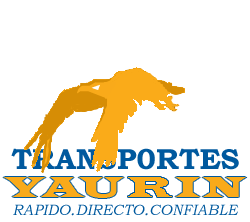
<style>
.page{position:relative;width:250px;height:222px;background:#ffffff}
.page>*{position:absolute;margin:0}
.t1{font:29px "BookmanOldStyle-Bold";letter-spacing:0.01em;color:#00599e}
.t2{font:30px "LatinWide";letter-spacing:0.025em;color:#f9aa1a}
.t3{font:15px "BookmanOldStyle-Italic";letter-spacing:0.005em;color:#00599e}
.t4{font:18px "BookmanOldStyle-Italic";letter-spacing:0.005em;color:#00599e}
</style>
<div class="page">
<p class="t1" style="left:11px;top:148px;width:228px;height:22px">TRANSP0RTES</p>
<p class="t2" style="left:3px;top:177px;width:43px;height:20px">Y</p>
<p class="t2" style="left:40px;top:177px;width:45px;height:20px">A</p>
<p class="t2" style="left:78px;top:177px;width:46px;height:21px">U</p>
<p class="t2" style="left:128px;top:177px;width:44px;height:20px">R</p>
<p class="t2" style="left:175px;top:177px;width:25px;height:20px">I</p>
<p class="t2" style="left:202px;top:177px;width:45px;height:20px">N</p>
<p class="t3" style="left:13px;top:204px;width:226px;height:12px">RAPIDO<span class="t4">.</span>DIRECTO<span class="t4">.</span>CONFIABLE</p>
</div>
